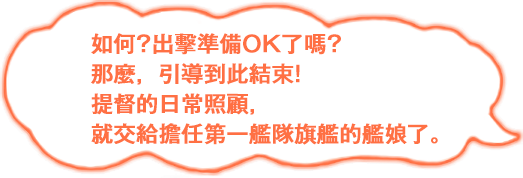
<style>
.page{position:relative;width:523px;height:178px;background:#ffffff}
.page>*{position:absolute;margin:0}
.t1{font:22px/30px "GothicMB101Pr6N-Medium";color:#ff7043;font-weight:bold}
</style>
<div class="page">
<p class="t1" style="left:91px;top:33px;width:347px;height:112px">如何?出擊準備OK了嗎?<br>那麼，引導到此結束!<br>提督的日常照顧，<br>就交給擔任第一艦隊旗艦的艦娘了。</p>
</div>
